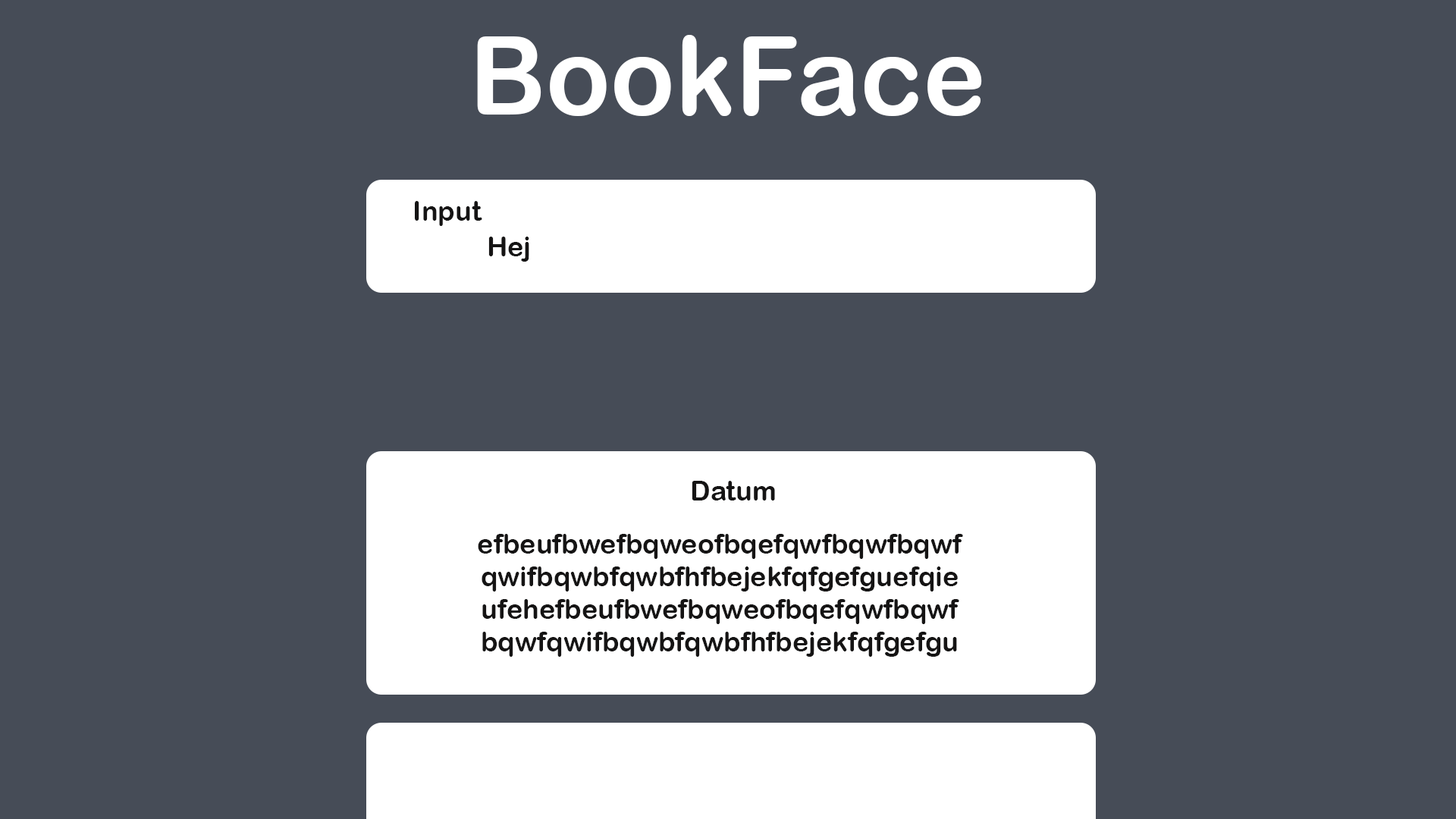
<style>
.page{position:relative;width:1456px;height:819px;background:#464c57}
.page>*{position:absolute;margin:0}
.t1{font:109.2px "ArialRoundedMTBold";color:#ffffff}
.t2{font:27.3px "ArialRoundedMTBold";color:#151414}
</style>
<div class="page">
<p class="t1" style="left:477px;top:35px;width:505px;height:81px">BookFace</p>
<p class="t2" style="left:415px;top:201px;width:67px;height:25px">Input</p>
<p class="t2" style="left:488px;top:237px;width:41px;height:25px">Hej</p>
<p class="t2" style="left:692px;top:481px;width:83px;height:19px">Datum</p>
<p class="t2" style="left:478px;top:534px;width:485px;height:123px;text-align:center">efbeufbwefbqweofbqefqwfbqwfbqwfqwifbqwbfqwbfhfbejekfqfgefguefqieufehefbeufbwefbqweofbqefqwfbqwfbqwfqwifbqwbfqwbfhfbejekfqfgefguefqieufeh</p>
</div>
